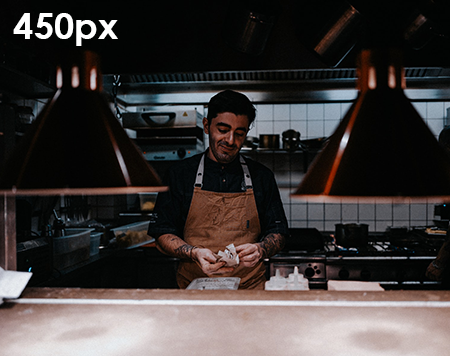
<style>
.page{position:relative;width:450px;height:356px}
.page>*{position:absolute;margin:0}
.t1{font:36px "CenturyGothic-Bold";color:#ffffff}
</style>
<div class="page">
<p class="t1" style="left:13px;top:13px;width:105px;height:33px">450px</p>
</div>
